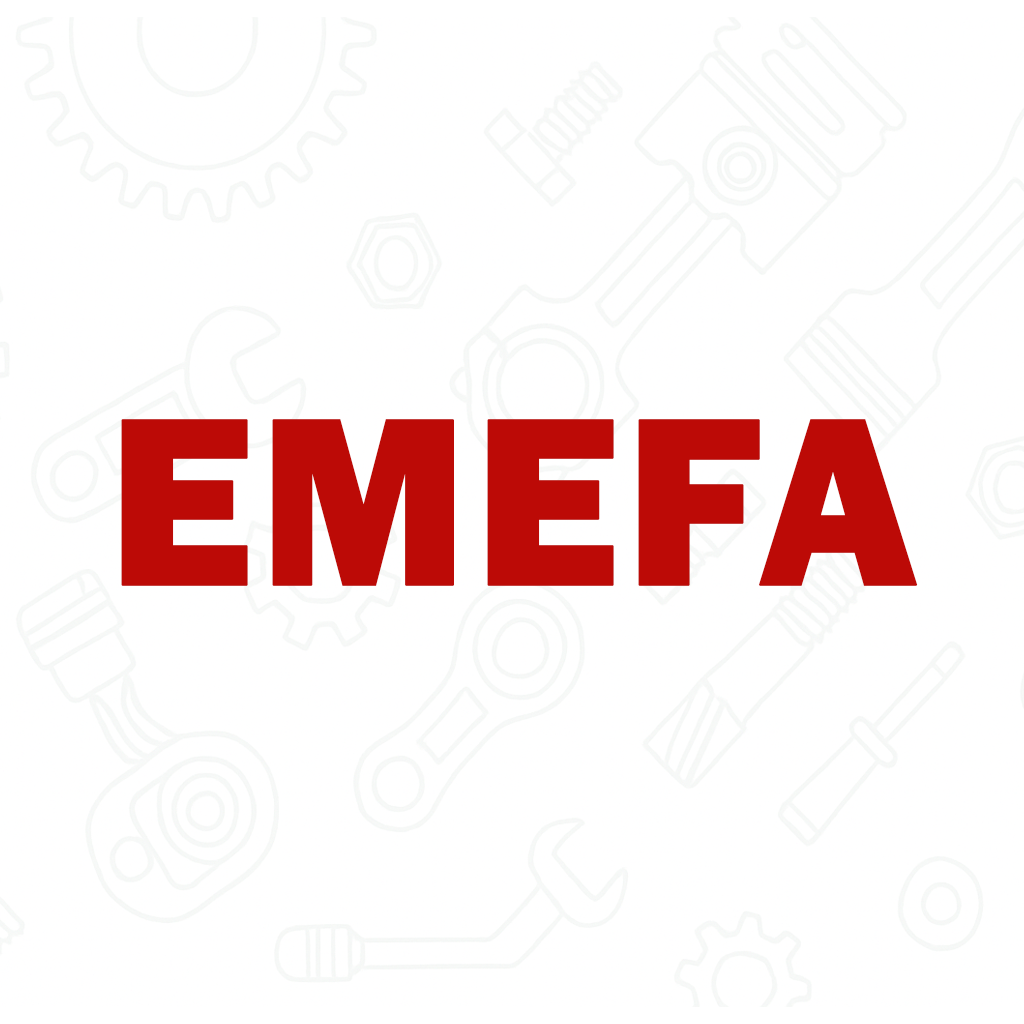
<style>
.page{position:relative;width:1024px;height:1024px;background:#ffffff}
.page>*{position:absolute;margin:0}
.t1{font:247.6px "FranklinGothic-Heavy";color:#bc0a06;font-weight:bold}
</style>
<div class="page">
<p class="t1" style="left:121px;top:419px;width:797px;height:167px">EMEFA</p>
</div>
